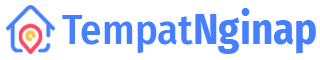
<style>
.page{position:relative;width:320px;height:60px;background:#ffffff}
.page>*{position:absolute;margin:0}
.t1{font:42.7px "FiraSansCondensed-Medium";color:#4680ff}
.t2{font:42.7px "FiraSansCondensed-Bold";color:#4680ff}
</style>
<div class="page">
<p class="t1" style="left:62px;top:8px;width:254px;height:46px">Tempat<span class="t2">Nginap</span></p>
</div>
